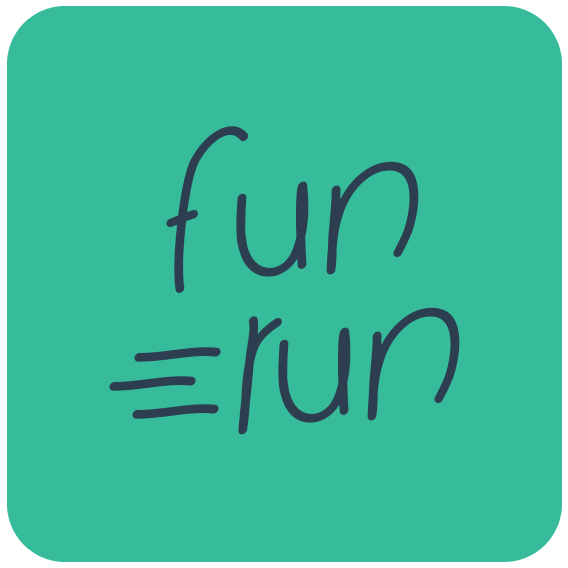
<style>
.page{position:relative;width:568px;height:568px;background:#37bc9b}
.page>*{position:absolute;margin:0}
.t1{font:187.5px/145.8px "LaFamilia";letter-spacing:0.01em;color:#2c3e50;font-style:italic}
</style>
<div class="page">
<p class="t1" style="left:166px;top:126px;width:294px;height:309px;text-align:center">FUN <br> RUN</p>
</div>
